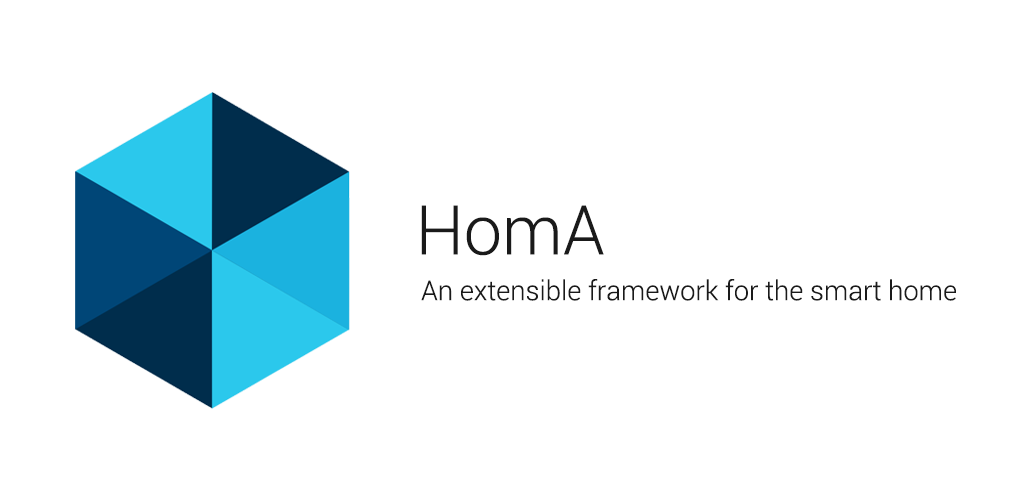
<style>
.page{position:relative;width:1024px;height:500px;background:#ffffff}
.page>*{position:absolute;margin:0}
.t1{font:68.7px "Roboto-Light";color:#1a1a1a}
.t2{font:27.5px "Roboto-Light";color:#1a1a1a}
</style>
<div class="page">
<p class="t1" style="left:421px;top:205px;width:183px;height:51px">HomA</p>
<p class="t2" style="left:421px;top:279px;width:535px;height:22px">An extensible framework for the smart home</p>
</div>
